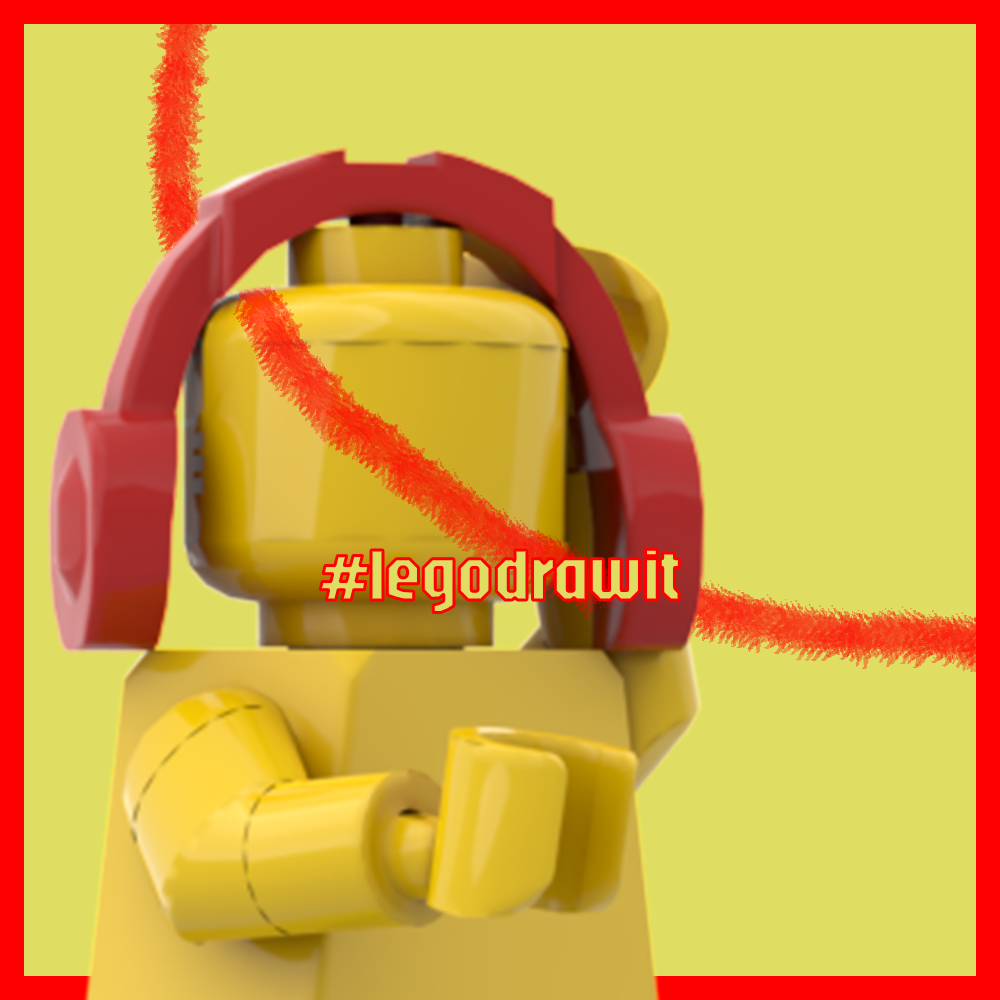
<style>
.page{position:relative;width:1000px;height:1000px;background:#dfde62}
.page>*{position:absolute;margin:0}
.t1{font:75px "JaroRegular-Regular";letter-spacing:-0.04em;color:#dfde62}
</style>
<div class="page">
<p class="t1" style="left:320px;top:549px;width:360px;height:64px">#legodrawit</p>
</div>
